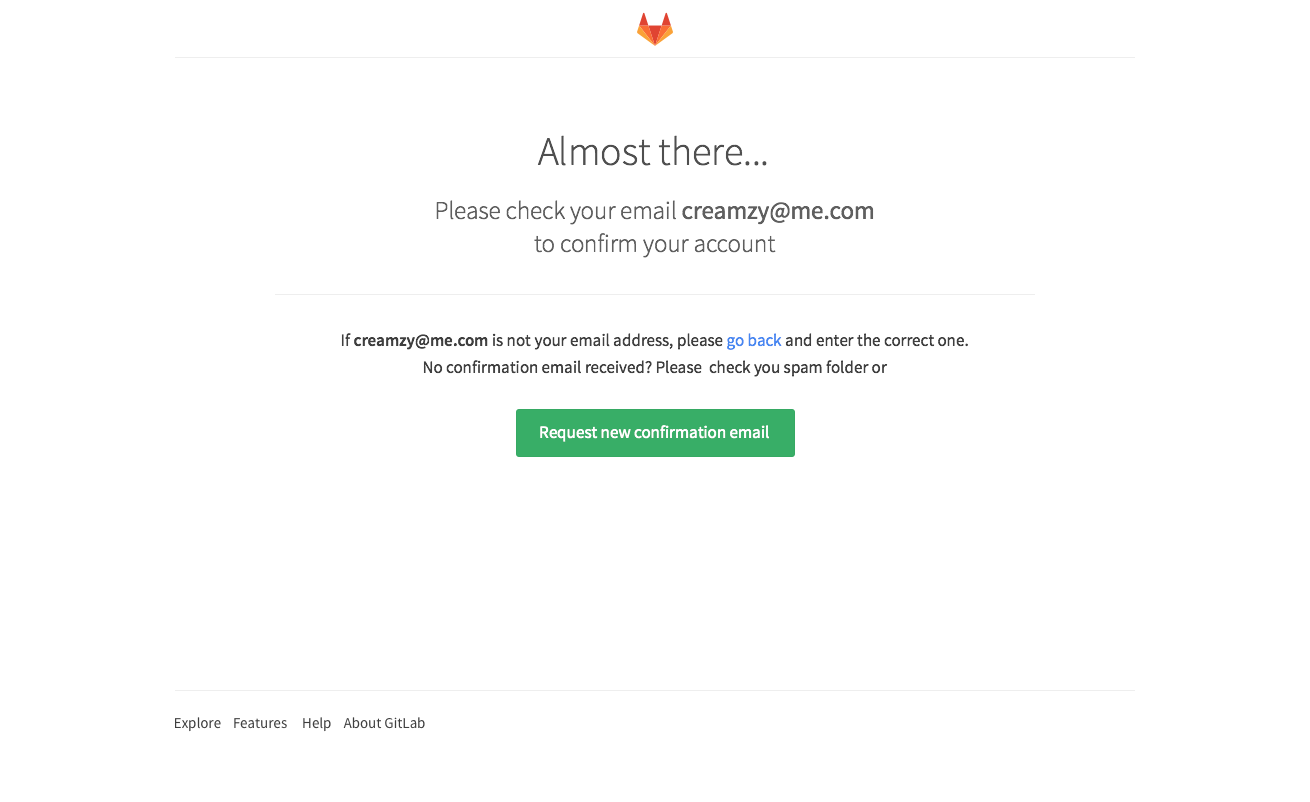
<style>
.page{position:relative;width:1310px;height:802px;background:#ffffff}
.page>*{position:absolute;margin:0}
.t1{font:40px "SourceSansPro-Light";color:#4f4f4f}
.t2{font:25px/33px "SourceSansPro-Light";color:#5f5f5f}
.t3{font:25px/33px "SourceSansPro-Regular";color:#5f5f5f}
.t4{font:17px/27px "SourceSansPro-Regular";color:#3f3f3f}
.t5{font:17px/27px "SourceSansPro-Semibold";color:#3f3f3f}
.t6{font:17px/27px "SourceSansPro-Regular";color:#4688f1}
.t7{font:17px "SourceSansPro-Regular";color:#ffffff}
.t8{font:15px "SourceSansPro-Regular";color:#3f3f3f}
</style>
<div class="page">
<p class="t1" style="left:537px;top:135px;width:230px;height:31px">Almost there...</p>
<p class="t2" style="left:436px;top:200px;width:438px;height:58px;text-align:center">Please check your email <span class="t3">creamzy@me.com<br></span>to confirm your account</p>
<p class="t4" style="left:341px;top:333px;width:627px;height:44px;text-align:center">If <span class="t5">creamzy@me.com</span> is not your email address, please <span class="t6">go back </span>and enter the correct one.<br>No confirmation email received? Please  check you spam folder or</p>
<p class="t7" style="left:540px;top:425px;width:229px;height:17px">Request new confirmation email</p>
<p class="t8" style="left:175px;top:717px;width:250px;height:15px">Explore    Features     Help    About GitLab</p>
</div>
